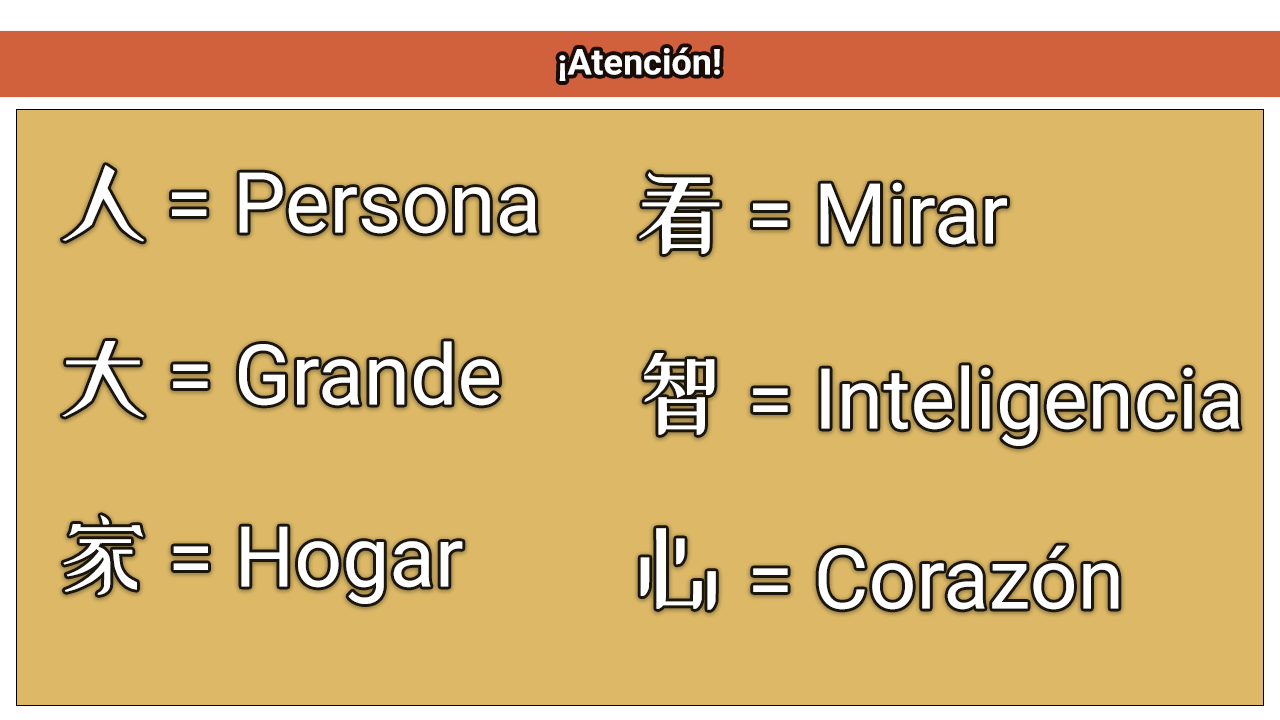
<style>
.page{position:relative;width:1280px;height:720px;background:#ddb967}
.page>*{position:absolute;margin:0}
.t1{font:36px "Roboto-Bold";color:#ffffff}
.t2{font:96px "ZCOOLXiaoWei-Regular";color:#ffffff}
.t3{font:84px "Roboto-Regular";color:#ffffff}
</style>
<div class="page">
<p class="t1" style="left:559px;top:47px;width:161px;height:34px">¡Atención!</p>
<p class="t2" style="left:62px;top:165px;width:82px;height:77px">人</p>
<p class="t3" style="left:172px;top:172px;width:365px;height:62px">= Persona</p>
<p class="t2" style="left:639px;top:172px;width:81px;height:82px">看</p>
<p class="t3" style="left:753px;top:182px;width:254px;height:63px">= Mirar</p>
<p class="t2" style="left:62px;top:341px;width:82px;height:77px">大</p>
<p class="t3" style="left:173px;top:341px;width:326px;height:65px">= Grande</p>
<p class="t2" style="left:644px;top:353px;width:71px;height:82px">智</p>
<p class="t3" style="left:753px;top:365px;width:487px;height:81px">= Inteligencia</p>
<p class="t2" style="left:63px;top:515px;width:80px;height:80px">家</p>
<p class="t3" style="left:173px;top:526px;width:290px;height:78px">= Hogar</p>
<p class="t2" style="left:640px;top:528px;width:76px;height:82px">心</p>
<p class="t3" style="left:753px;top:545px;width:366px;height:65px">= Corazón</p>
</div>
